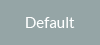
<style>
.page{position:relative;width:100px;height:45px;background:#95a5a6}
.page>*{position:absolute;margin:0}
.t1{font:15px "Lato-Regular";color:#feffff}
</style>
<div class="page">
<p class="t1" style="left:26px;top:17px;width:49px;height:11px">Default</p>
</div>
